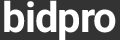
<style>
.page{position:relative;width:120px;height:40px;background:#333333}
.page>*{position:absolute;margin:0}
.t1{font:41.7px "Roboto-Bold";letter-spacing:-0.025em;color:#ffffff}
</style>
<div class="page">
<p class="t1" style="left:4px;top:0px;width:112px;height:41px">bidpro</p>
</div>
